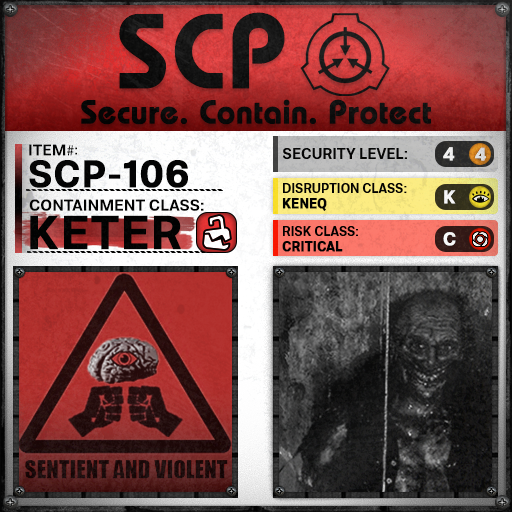
<style>
.page{position:relative;width:512px;height:512px}
.page>*{position:absolute;margin:0}
.t1{font:105.8px "BauhausLT-Demi";color:#000000;font-weight:bold}
.t2{font:33px "BauhausLT-Demi";color:#000000;font-weight:bold}
.t3{font:15.7px "Molde-Semibold";color:#000000}
.t4{font:15.7px "MyriadPro-Regular";color:#000000}
.t5{font:13.7px "Molde-Semibold";color:#000000}
.t6{font:15px "Molde-Semibold";color:#000000}
.t7{font:18.6px "Molde-Semibold";color:#ffffff;font-weight:bold}
.t8{font:17.8px "Molde-Semibold";color:#dadada;font-weight:bold}
.t9{font:38.2px "Molde-Semibold";color:#000000;font-weight:bold}
.t10{font:12.8px "Molde-Semibold";color:#000000}
.t11{font:12.8px "Molde-Semibold";color:#000000;font-weight:bold}
.t12{font:15.9px "Molde-Semibold";color:#000000}
.t13{font:47.2px "Molde-Semibold";color:#000000;font-weight:bold}
</style>
<div class="page">
<p class="t1" style="left:119px;top:12px;width:166px;height:77px">SCP</p>
<p class="t2" style="left:81px;top:99px;width:350px;height:26px">Secure. Contain. Protect</p>
<p class="t3" style="left:29px;top:144px;width:45px;height:12px">ITEM<span class="t4">#</span></p>
<p class="t5" style="left:75px;top:147px;width:2px;height:8px">:</p>
<p class="t6" style="left:283px;top:148px;width:124px;height:11px">SECURITY LEVEL:</p>
<p class="t7" style="left:443px;top:147px;width:12px;height:14px">4</p>
<p class="t8" style="left:475px;top:147px;width:11px;height:14px">4</p>
<p class="t9" style="left:29px;top:160px;width:159px;height:28px">SCP-106</p>
<p class="t10" style="left:282px;top:183px;width:125px;height:28px">DISRUPTION CLASS:<br><span class="t11">KENEQ</span></p>
<p class="t7" style="left:444px;top:190px;width:12px;height:14px">K</p>
<p class="t12" style="left:29px;top:199px;width:175px;height:12px">CONTAINMENT CLASS:</p>
<p class="t13" style="left:30px;top:215px;width:151px;height:35px">KETER</p>
<p class="t10" style="left:282px;top:226px;width:76px;height:26px">RISK CLASS:<br><span class="t11">CRITICAL</span></p>
<p class="t7" style="left:443px;top:232px;width:13px;height:14px">C</p>
</div>
